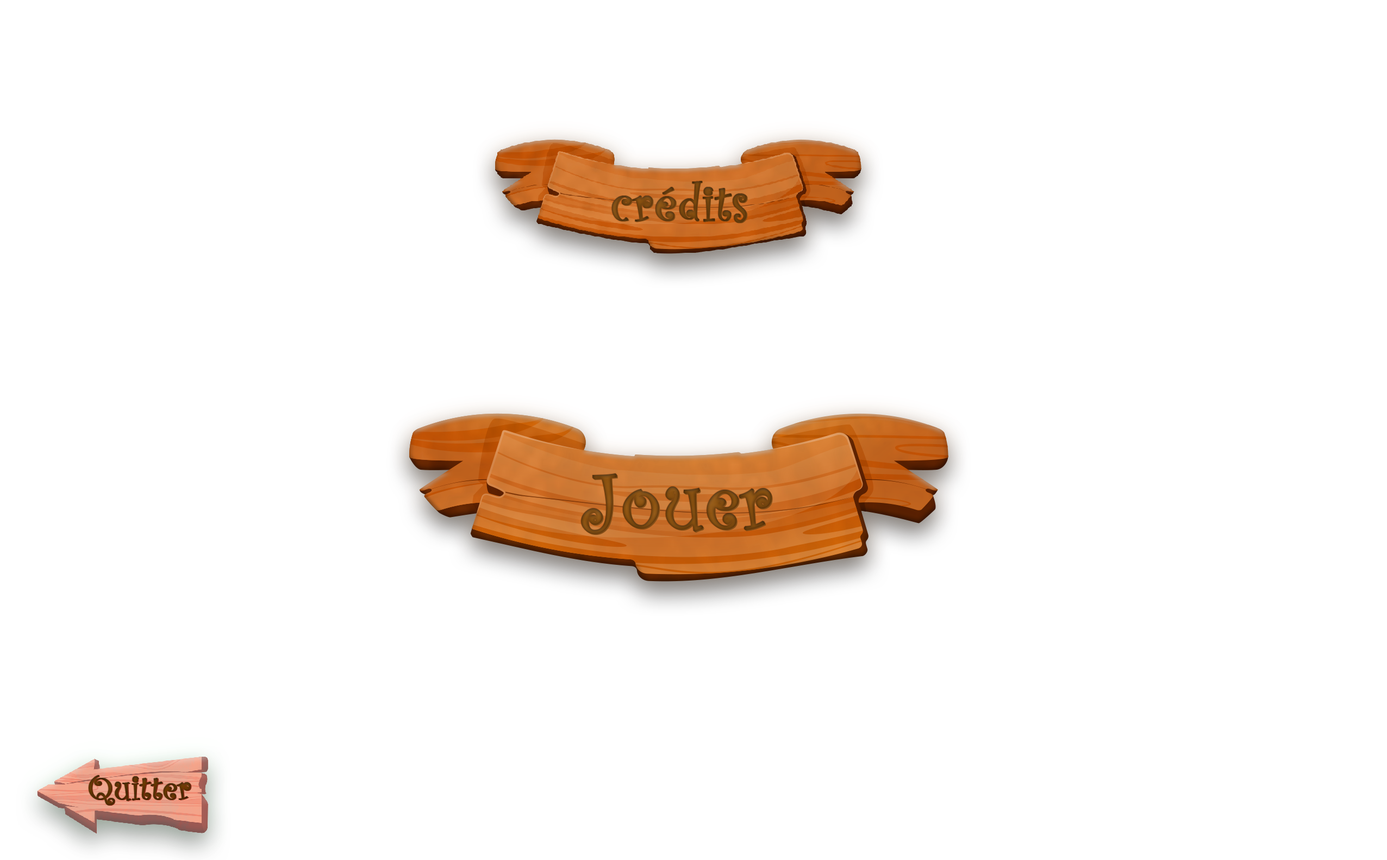
<style>
.page{position:relative;width:1387px;height:860px;background:#ffffff}
.page>*{position:absolute;margin:0}
.t1{font:52.4px "CurlzMT";color:#6a400e;font-weight:bold}
.t2{font:52.4px "CurlzMT";color:#7d4811;font-weight:bold}
.t3{font:82.6px "CurlzMT";color:#794810;font-weight:bold}
.t4{font:82.6px "CurlzMT";color:#7d4811;font-weight:bold}
.t5{font:34.8px "CurlzMT";color:#542e01;font-weight:bold}
.t6{font:34.8px "CurlzMT";color:#5e2d04;font-weight:bold}
</style>
<div class="page">
<p class="t1" style="left:611px;top:181px;width:136px;height:42px">crédits</p>
<p class="t2" style="left:612px;top:182px;width:136px;height:41px">crédits</p>
<p class="t3" style="left:581px;top:473px;width:191px;height:61px">Jouer</p>
<p class="t4" style="left:582px;top:474px;width:191px;height:61px">Jouer</p>
<p class="t5" style="left:89px;top:775px;width:102px;height:30px">Quitter</p>
<p class="t6" style="left:89px;top:776px;width:103px;height:29px">Quitter</p>
</div>
